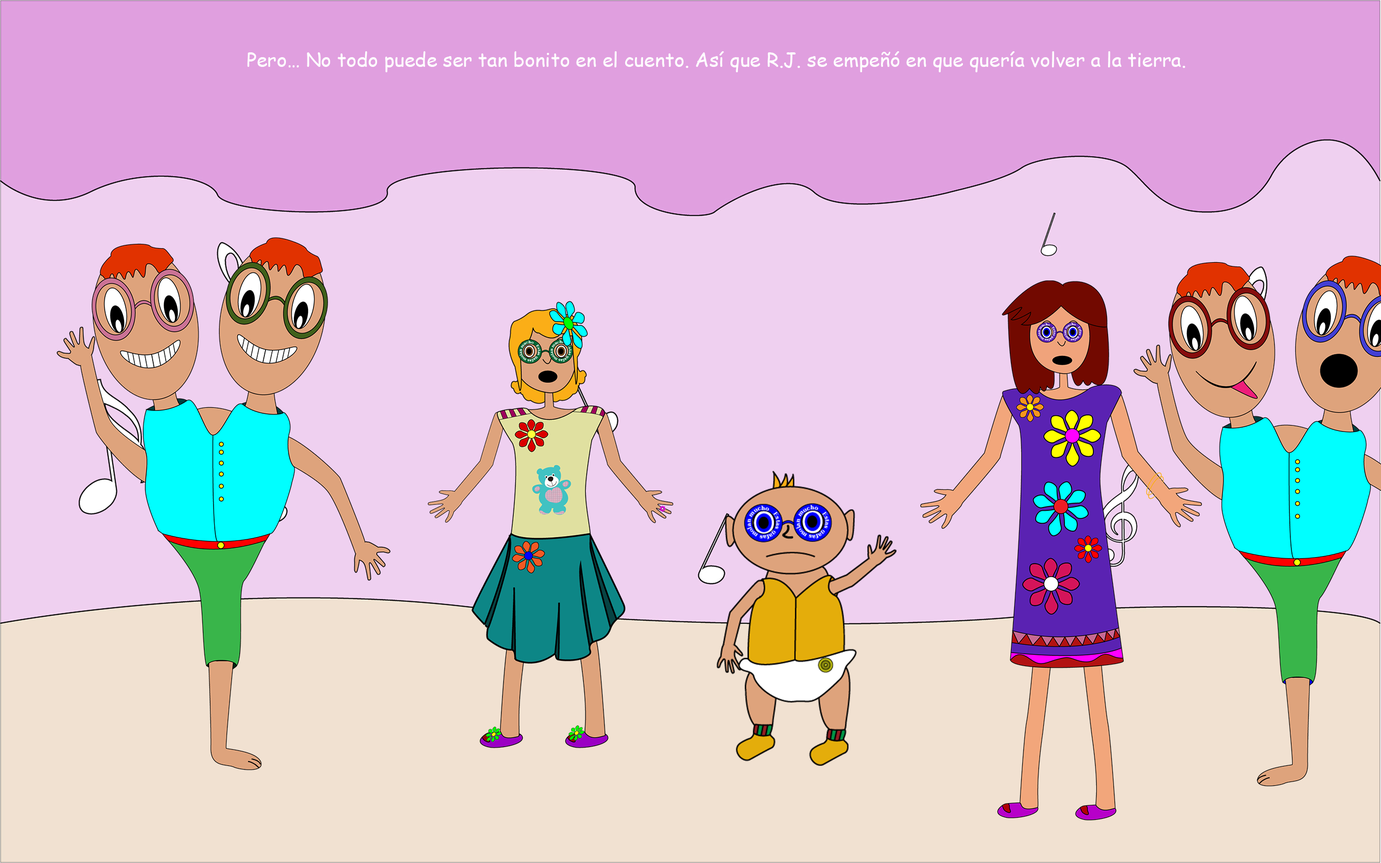
<style>
.page{position:relative;width:1381px;height:863px;background:#efd0f0}
.page>*{position:absolute;margin:0}
.t1{font:19.4px "ComicSansMS";color:#ffffff}
</style>
<div class="page">
<p class="t1" style="left:247px;top:51px;width:938px;height:21px">Pero… No todo puede ser tan bonito en el cuento. Así que R.J. se empeñó en que quería volver a la tierra.</p>
</div>
